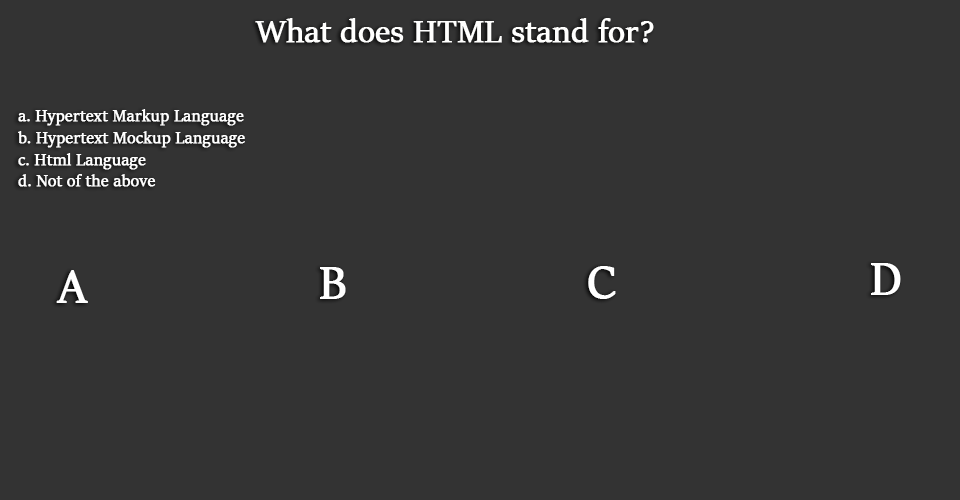
<style>
.page{position:relative;width:960px;height:500px;background:#333333}
.page>*{position:absolute;margin:0}
.t1{font:35px "SitkaBanner";color:#fffffe;font-weight:bold}
.t2{font:18px "SitkaBanner";color:#ffffff;font-weight:bold}
.t3{font:50px "SitkaBanner";color:#ffffff;font-weight:bold}
</style>
<div class="page">
<p class="t1" style="left:255px;top:18px;width:399px;height:25px">What does HTML stand for?</p>
<p class="t2" style="left:18px;top:109px;width:227px;height:78px">a. Hypertext Markup Language<br> b. Hypertext Mockup Language<br> c. Html Language <br> d. Not of the above</p>
<p class="t3" style="left:56px;top:270px;width:32px;height:33px">A</p>
<p class="t3" style="left:320px;top:267px;width:26px;height:32px">B</p>
<p class="t3" style="left:588px;top:266px;width:28px;height:33px">C</p>
<p class="t3" style="left:871px;top:263px;width:30px;height:32px">D</p>
</div>
